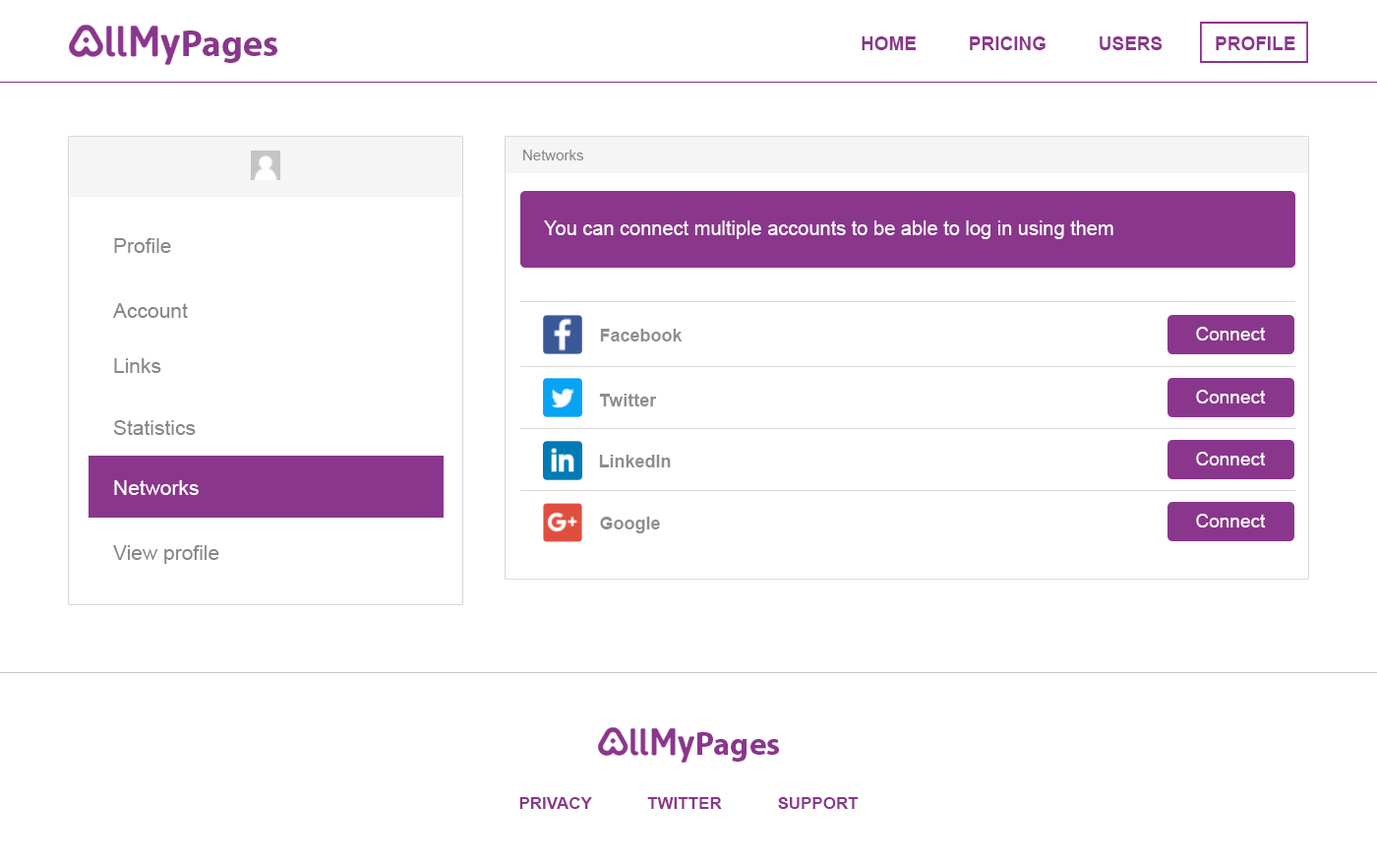
<style>
.page{position:relative;width:1377px;height:866px;background:#ffffff}
.page>*{position:absolute;margin:0}
.t1{font:37.2px "MyriadPro-Bold";color:#8a368c}
.t2{font:18.7px "Arial-BoldMT";color:#8a368c}
.t3{font:14.8px "ArialMT";color:#848484}
.t4{font:19.7px "ArialMT";color:#ffffff}
.t5{font:20.7px "ArialMT";color:#878787}
.t6{font:17.7px "Arial-BoldMT";color:#8f8e8e}
.t7{font:18.7px "ArialMT";color:#ffffff}
.t8{font:20.7px "ArialMT";color:#ffffff}
.t9{font:32.6px "MyriadPro-Bold";color:#8a368c}
.t10{font:16.7px "Arial-BoldMT";color:#8a368c}
</style>
<div class="page">
<p class="t1" style="left:183px;top:30px;width:94px;height:33px">Pages</p>
<p class="t2" style="left:862px;top:36px;width:434px;height:14px">HOME          PRICING          USERS          PROFILE</p>
<p class="t3" style="left:523px;top:150px;width:61px;height:10px">Networks</p>
<p class="t4" style="left:544px;top:220px;width:570px;height:19px">You can connect multiple accounts to be able to log in using them</p>
<p class="t5" style="left:114px;top:238px;width:57px;height:15px">Profile</p>
<p class="t5" style="left:113px;top:303px;width:75px;height:15px">Account</p>
<p class="t6" style="left:600px;top:329px;width:83px;height:12px">Facebook</p>
<p class="t7" style="left:1196px;top:327px;width:70px;height:13px">Connect</p>
<p class="t5" style="left:114px;top:358px;width:47px;height:15px">Links</p>
<p class="t7" style="left:1196px;top:390px;width:70px;height:13px">Connect</p>
<p class="t6" style="left:599px;top:394px;width:58px;height:12px">Twitter</p>
<p class="t5" style="left:113px;top:420px;width:83px;height:15px">Statistics</p>
<p class="t6" style="left:599px;top:455px;width:72px;height:12px">Linkedln</p>
<p class="t7" style="left:1196px;top:452px;width:70px;height:13px">Connect</p>
<p class="t8" style="left:114px;top:480px;width:85px;height:15px">Networks</p>
<p class="t6" style="left:600px;top:517px;width:60px;height:16px">Google</p>
<p class="t7" style="left:1196px;top:514px;width:70px;height:13px">Connect</p>
<p class="t5" style="left:113px;top:545px;width:106px;height:19px">View profile</p>
<p class="t9" style="left:698px;top:732px;width:81px;height:29px">Pages</p>
<p class="t10" style="left:519px;top:797px;width:340px;height:12px">PRIVACY            TWITTER            SUPPORT</p>
</div>
